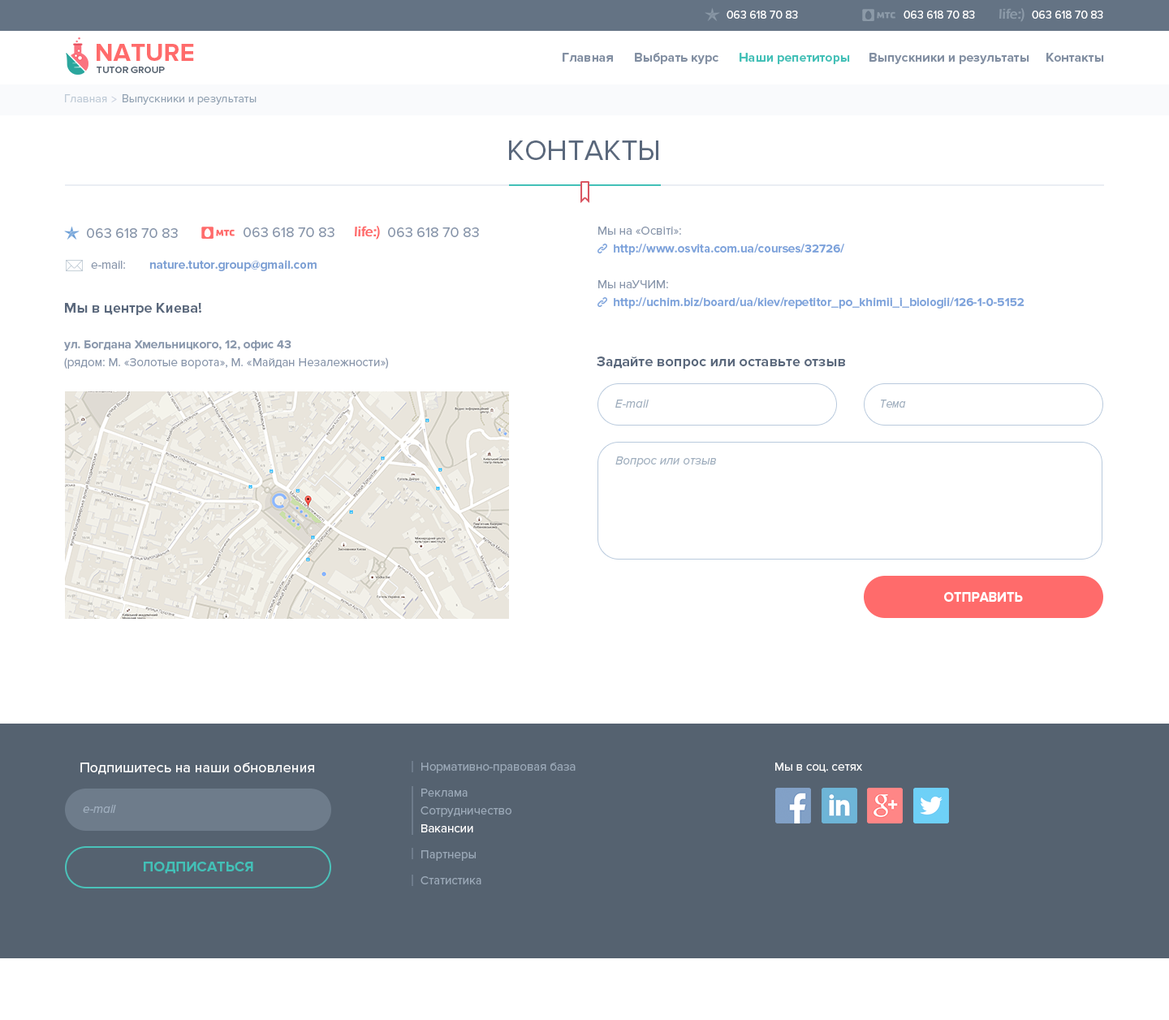
<style>
.page{position:relative;width:1169px;height:1020px;background:#ffffff}
.page>*{position:absolute;margin:0}
.t1{font:11.4px "ProximaNova-Regular";color:#ffffff}
.t2{font:25.2px "ProximaNova-Bold";color:#ff6b6b}
.t3{font:13px "ProximaNova-Bold";color:#828fa2}
.t4{font:13px "ProximaNova-Bold";color:#42c0b7}
.t5{font:9.7px "ProximaNova-Semibold";color:#556270;text-transform:uppercase}
.t6{font:11.4px "ProximaNova-Regular";color:#a8b5c4}
.t7{font:11.4px "ProximaNova-Regular";color:#7d8c9c}
.t8{font:29.2px "ProximaNova-Regular";color:#5a687c;text-transform:uppercase}
.t9{font:14.6px "ProximaNova-Regular";color:#8896ab}
.t10{font:12.2px/17.9px "ProximaNova-Bold";color:#7ca2db}
.t11{font:12.2px/17.9px "ProximaNova-Regular";color:#8896ab}
.t12{font:12.2px "ProximaNova-Bold";color:#7b9fd4}
.t13{font:12.2px "ProximaNova-Regular";color:#8896ab}
.t14{font:14.6px/17.9px "ProximaNova-Bold";color:#5a687c}
.t15{font:12.2px/17.9px "ProximaNova-Bold";color:#8896ab}
.t16{font:14.6px "ProximaNova-Bold";color:#5a687c}
.t17{font:12.2px "ProximaNova-RegularIt";color:#9faebe}
.t18{font:12.2px "ProximaNova-RegularIt";color:#9faebe;scale:0.9 1}
.t19{font:14.6px "ProximaNova-Bold";color:#ffffff;text-transform:uppercase;scale:0.9 1}
.t20{font:14.6px "ProximaNova-Regular";color:#ffffff}
.t21{font:12.2px/17.9px "ProximaNova-Regular";color:#9ba9b8}
.t22{font:12.2px/26px "ProximaNova-Regular";color:#9ba9b8}
.t23{font:12.2px/17.9px "ProximaNova-Regular";color:#fefeff}
.t24{font:12.2px "ProximaNova-Regular";color:#ffffff}
.t25{font:14.6px "ProximaNova-Bold";color:#42c0b7;text-transform:uppercase}
</style>
<div class="page">
<p class="t1" style="left:727px;top:11px;width:71px;height:8px">063 618 70 83</p>
<p class="t1" style="left:904px;top:11px;width:71px;height:8px">063 618 70 83</p>
<p class="t1" style="left:1032px;top:11px;width:71px;height:8px">063 618 70 83</p>
<p class="t2" style="left:97px;top:44px;width:97px;height:17px">NATURE</p>
<p class="t3" style="left:563px;top:53px;width:50px;height:9px">Главная</p>
<p class="t3" style="left:635px;top:53px;width:84px;height:11px">Выбрать курс</p>
<p class="t4" style="left:740px;top:53px;width:110px;height:11px">Наши репетиторы</p>
<p class="t3" style="left:870px;top:53px;width:160px;height:11px">Выпускники и результаты</p>
<p class="t3" style="left:1047px;top:53px;width:57px;height:9px">Контакты</p>
<p class="t5" style="left:97px;top:67px;width:68px;height:6px">Tutor group</p>
<p class="t6" style="left:65px;top:94px;width:42px;height:8px">Главная</p>
<p class="t7" style="left:123px;top:94px;width:134px;height:11px">Выпускники и результаты</p>
<p class="t8" style="left:509px;top:140px;width:150px;height:20px">Контакты</p>
<p class="t9" style="left:87px;top:228px;width:91px;height:10px">063 618 70 83</p>
<p class="t9" style="left:244px;top:227px;width:91px;height:10px">063 618 70 83</p>
<p class="t9" style="left:388px;top:227px;width:91px;height:10px">063 618 70 83</p>
<p class="t10" style="left:598px;top:227px;width:427px;height:82px"><span class="t11">Мы на «Освіті»:<br></span>     http://www.osvita.com.ua/courses/32726/<br><span class="t11"><br>Мы наУЧИМ:<br></span>     http://uchim.biz/board/ua/kiev/repetitor_po_khimii_i_biologii/126-1-0-5152</p>
<p class="t12" style="left:91px;top:260px;width:226px;height:11px"><span class="t13">e-mail: </span>nature.tutor.group@gmail.com</p>
<p class="t11" style="left:64px;top:303px;width:324px;height:66px"><span class="t14">Мы в центре Киева!<br><br></span><span class="t15">ул. Богдана Хмельницкого, 12, офис 43<br></span>(рядом: М. «Золотые ворота», М. «Майдан Незалежности»)</p>
<p class="t16" style="left:597px;top:356px;width:248px;height:13px">Задайте вопрос или оставьте отзыв</p>
<p class="t17" style="left:615px;top:399px;width:34px;height:9px">E-mail</p>
<p class="t18" style="left:881px;top:399px;width:25px;height:9px">Тема</p>
<p class="t17" style="left:615px;top:456px;width:101px;height:11px">Вопрос или отзыв</p>
<p class="t19" style="left:944px;top:592px;width:79px;height:10px">Отправить</p>
<p class="t20" style="left:80px;top:762px;width:234px;height:13px">Подпишитесь на наши обновления</p>
<p class="t21" style="left:421px;top:762px;width:155px;height:122px">Нормативно-правовая база<br><span class="t22">Реклама<br></span>Cотрудничество<br><span class="t23">Вакансии <br></span><span class="t22">Партнеры<br>Статистика</span></p>
<p class="t24" style="left:775px;top:762px;width:87px;height:10px">Мы в соц. сетях</p>
<p class="t17" style="left:83px;top:805px;width:33px;height:8px">e-mail</p>
<p class="t25" style="left:144px;top:862px;width:109px;height:12px">Подписаться</p>
</div>
